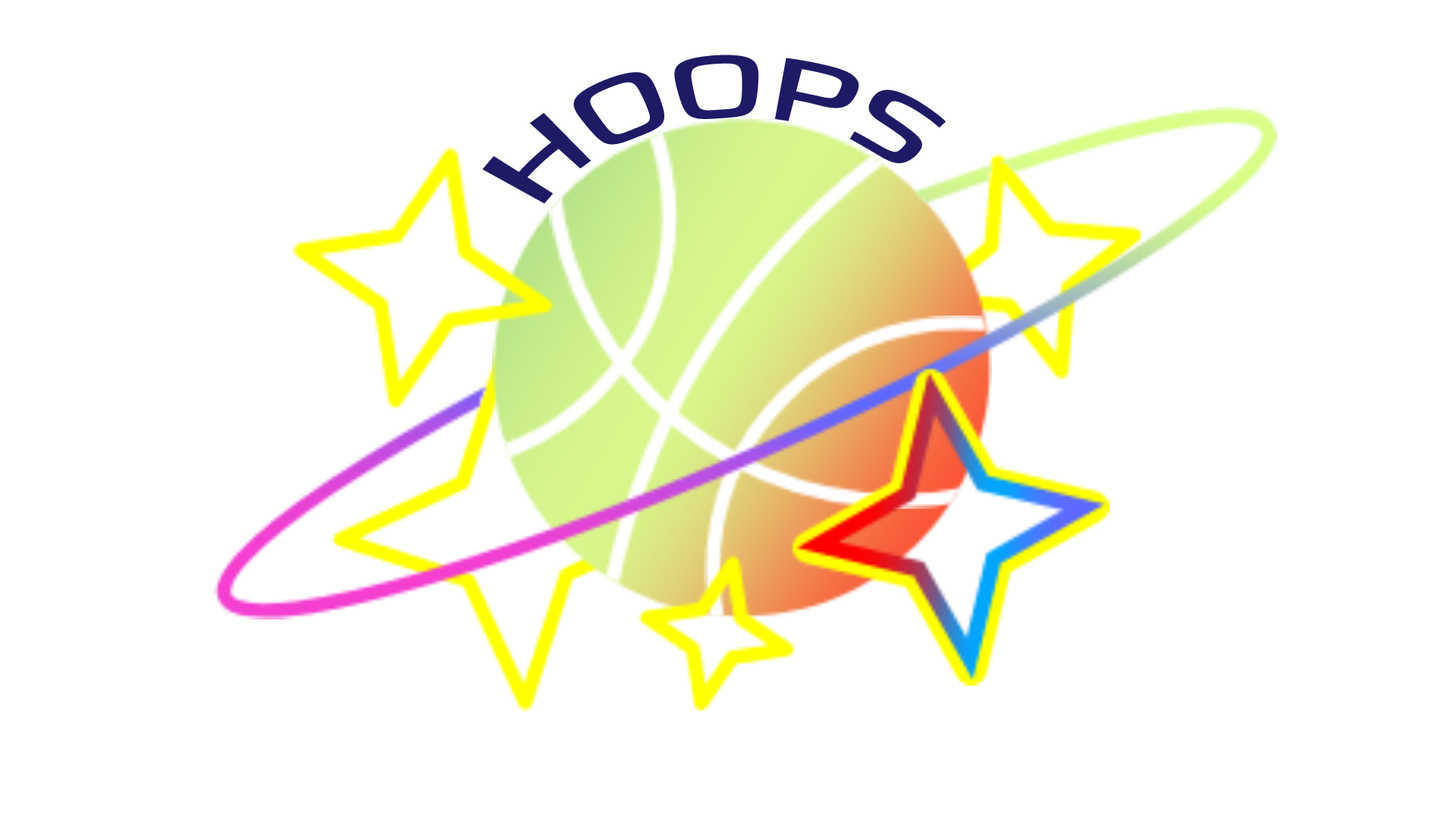
<style>
.page{position:relative;width:1456px;height:819px;background:#ffffff}
.page>*{position:absolute;margin:0}
.t1{font:90px "Saira-Medium";color:#1f1a65;scale:1.2 1}
</style>
<div class="page">
<p class="t1" style="left:482px;top:55px;width:464px;height:149px;rotate:-6deg">HOOPS</p>
</div>
